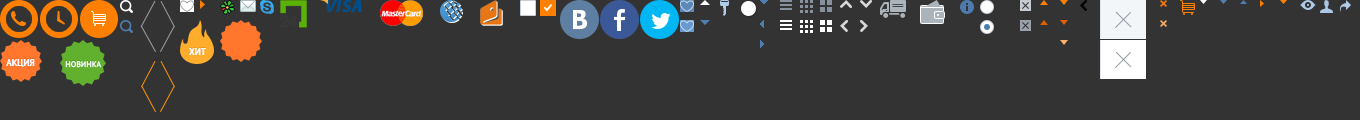
<style>
.page{position:relative;width:1360px;height:120px;background:#333333}
.page>*{position:absolute;margin:0}
.t1{font:9px "PTSans-Bold";color:#ffffff;text-transform:uppercase}
.t2{font:8px "PTSans-Regular";color:#ffffff;text-transform:uppercase}
</style>
<div class="page">
<p class="t1" style="left:189px;top:48px;width:17px;height:7px">Хит</p>
<p class="t1" style="left:6px;top:59px;width:29px;height:8px">Акция</p>
<p class="t2" style="left:65px;top:61px;width:36px;height:7px">Новинка</p>
</div>
